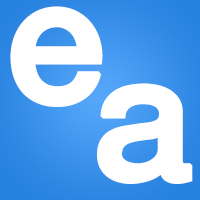
<style>
.page{position:relative;width:200px;height:200px;background:#ffffff}
.page>*{position:absolute;margin:0}
.t1{font:175px "HelveticaNeue-Medium";color:#ffffff;font-weight:bold}
</style>
<div class="page">
<p class="t1" style="left:10px;top:6px;width:93px;height:101px">e</p>
<p class="t1" style="left:97px;top:83px;width:96px;height:101px">a</p>
</div>
